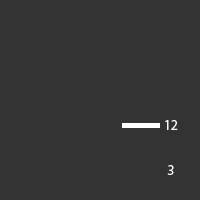
<style>
.page{position:relative;width:200px;height:200px;background:#333333}
.page>*{position:absolute;margin:0}
.t1{font:14px "MyriadPro-Regular";color:#ffffff}
</style>
<div class="page">
<p class="t1" style="left:165px;top:120px;width:13px;height:10px">12</p>
<p class="t1" style="left:167px;top:165px;width:7px;height:10px">3</p>
</div>
